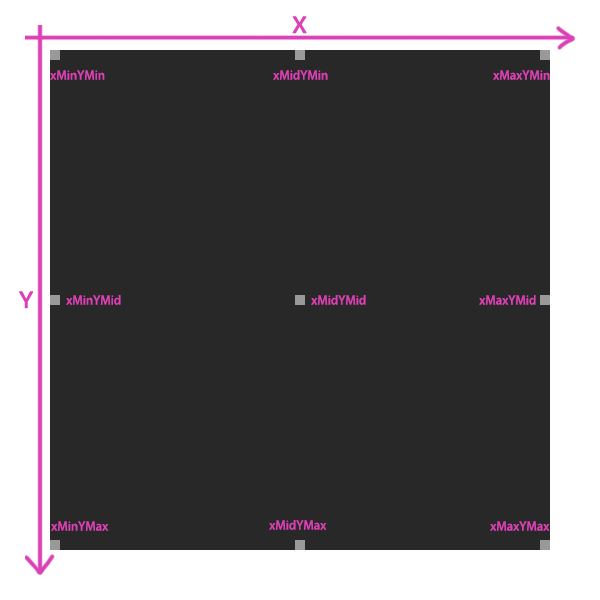
<style>
.page{position:relative;width:600px;height:600px;background:#282828}
.page>*{position:absolute;margin:0}
.t1{font:24px "SIL-Hei-Med-Jian";color:#db41b5;font-weight:bold}
.t2{font:12px "AdobeHeitiStd-Regular";color:#db41b5}
</style>
<div class="page">
<p class="t1" style="left:292px;top:16px;width:15px;height:18px">X</p>
<p class="t2" style="left:50px;top:70px;width:55px;height:10px">xMinYMin</p>
<p class="t2" style="left:273px;top:70px;width:55px;height:10px">xMidYMin</p>
<p class="t2" style="left:493px;top:70px;width:57px;height:10px">xMaxYMin</p>
<p class="t1" style="left:19px;top:291px;width:15px;height:18px">Y</p>
<p class="t2" style="left:66px;top:295px;width:55px;height:10px">xMinYMid</p>
<p class="t2" style="left:311px;top:295px;width:55px;height:10px">xMidYMid</p>
<p class="t2" style="left:479px;top:295px;width:57px;height:10px">xMaxYMid</p>
<p class="t2" style="left:51px;top:521px;width:58px;height:10px">xMinYMax</p>
<p class="t2" style="left:269px;top:520px;width:58px;height:10px">xMidYMax</p>
<p class="t2" style="left:490px;top:521px;width:60px;height:10px">xMaxYMax</p>
</div>
